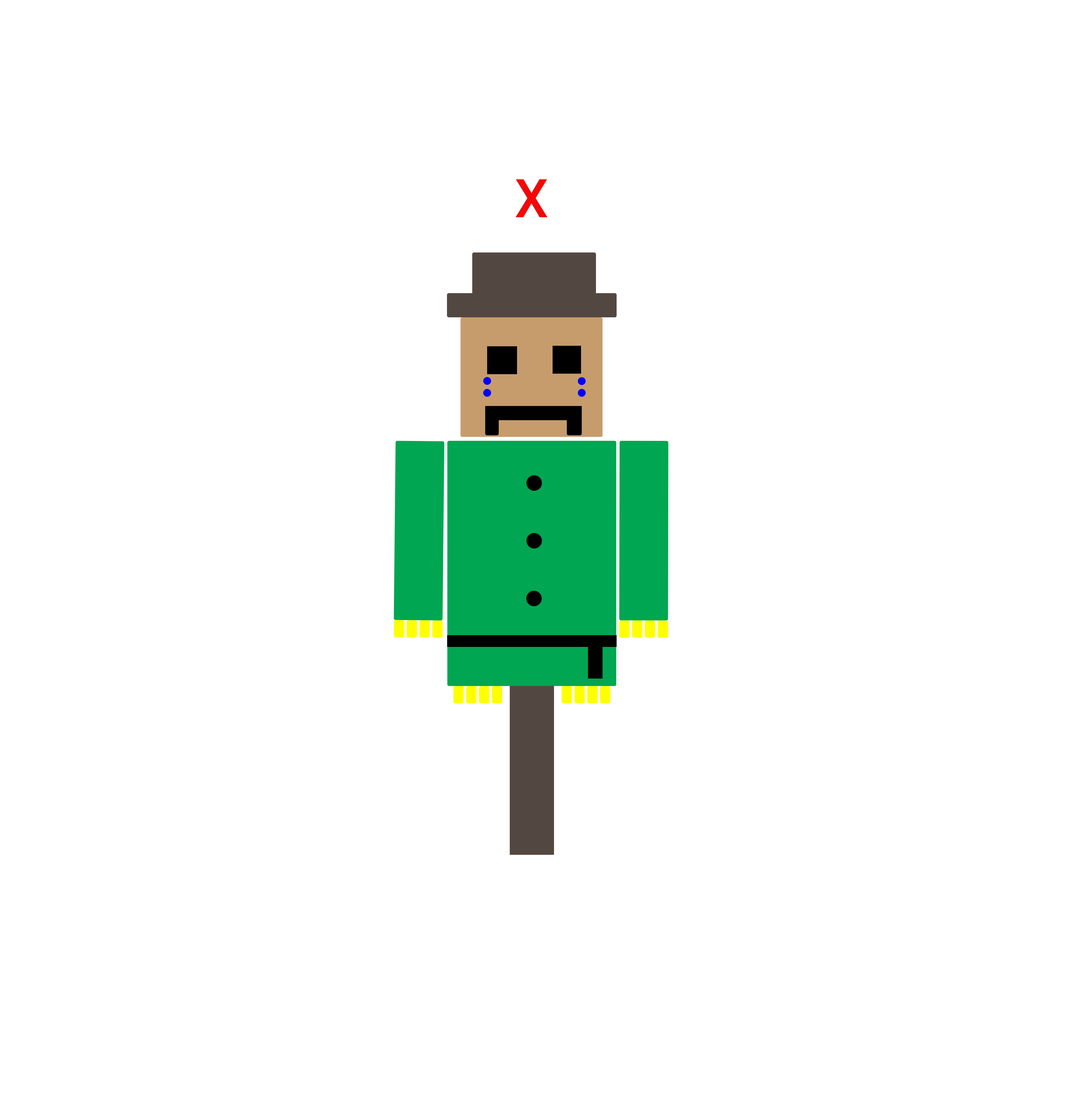
<style>
.page{position:relative;width:1081px;height:1103px;background:#ffffff}
.page>*{position:absolute;margin:0}
.t1{font:53.3px "Roboto-Medium";color:#f10808}
</style>
<div class="page">
<p class="t1" style="left:515px;top:179px;width:32px;height:38px">X</p>
</div>
